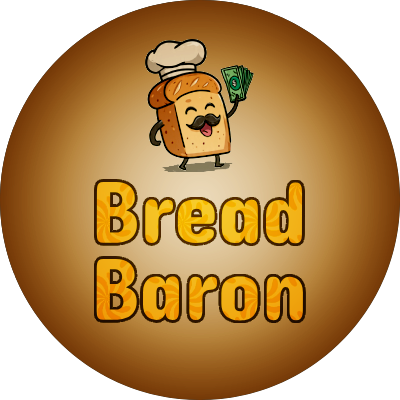
<style>
.page{position:relative;width:400px;height:400px;background:#ffffff}
.page>*{position:absolute;margin:0}
.t1{font:88.9px/77px "Dangrek-Regular";color:#f2ac0d}
</style>
<div class="page">
<p class="t1" style="left:96px;top:182px;width:207px;height:139px">Bread<br>Baron</p>
</div>
